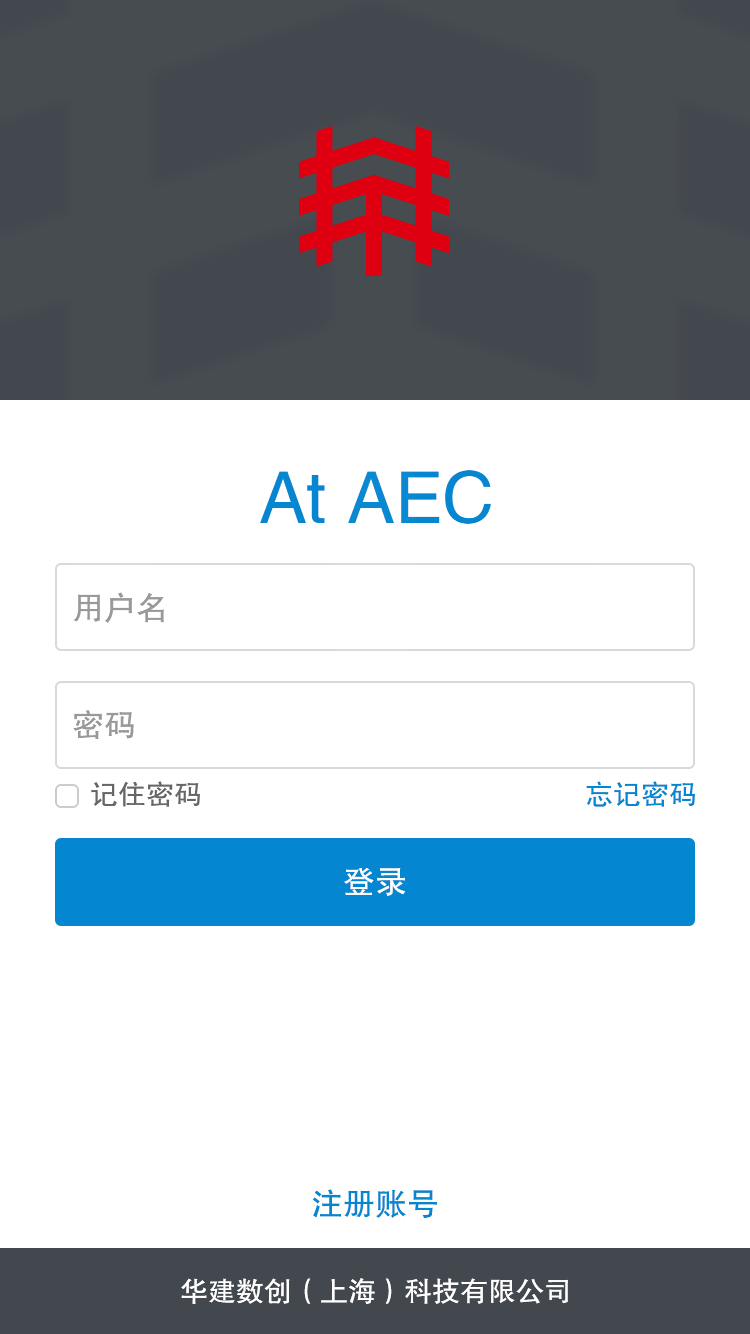
<style>
.page{position:relative;width:750px;height:1334px;background:#ffffff}
.page>*{position:absolute;margin:0}
.t1{font:72px "FZHTJW--GB1-0";color:#0487d0}
.t2{font:32px "FZHTJW--GB1-0";color:#999999}
.t3{font:28px "FZHTJW--GB1-0";color:#666666}
.t4{font:28px "FZHTJW--GB1-0";color:#0487d0}
.t5{font:32px "FZHTJW--GB1-0";color:#fffefe}
.t6{font:32px "FZHTJW--GB1-0";color:#0487d0}
.t7{font:28px "FZHTJW--GB1-0";color:#ffffff}
</style>
<div class="page">
<p class="t1" style="left:260px;top:470px;width:231px;height:54px">At AEC</p>
<p class="t2" style="left:73px;top:592px;width:91px;height:31px">用户名</p>
<p class="t2" style="left:73px;top:710px;width:61px;height:29px">密码</p>
<p class="t3" style="left:91px;top:781px;width:109px;height:26px">记住密码</p>
<p class="t4" style="left:586px;top:781px;width:109px;height:26px">忘记密码</p>
<p class="t5" style="left:344px;top:868px;width:62px;height:28px">登录</p>
<p class="t6" style="left:312px;top:1189px;width:125px;height:29px">注册账号</p>
<p class="t7" style="left:181px;top:1278px;width:387px;height:26px">华建数创（上海）科技有限公司</p>
</div>
